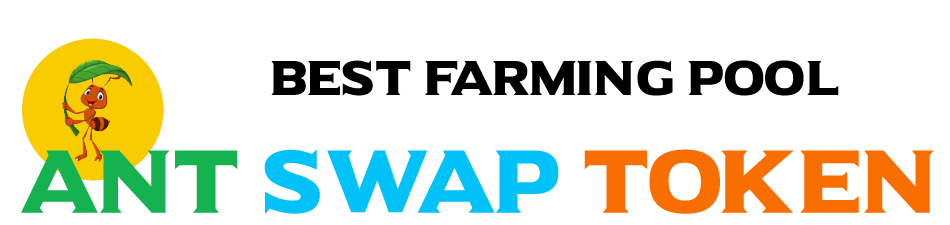
<style>
.page{position:relative;width:950px;height:225px;background:#ffffff}
.page>*{position:absolute;margin:0}
.t1{font:48px "UniversalSerif";color:#000000}
.t2{font:88px "UniversalSerif";color:#f86f00}
.t3{font:88px "UniversalSerif";color:#15b250}
.t4{font:88px "UniversalSerif";color:#00c1f8}
</style>
<div class="page">
<p class="t1" style="left:271px;top:60px;width:568px;height:36px">Best Farming POOL</p>
<p class="t2" style="left:21px;top:149px;width:913px;height:65px"><span class="t3">ANT </span><span class="t4">SWAP</span> TOKEN</p>
</div>
